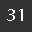
<style>
.page{position:relative;width:32px;height:32px;background:#333333}
.page>*{position:absolute;margin:0}
.t1{font:17.8px "MyriadPro-Regular";color:#ffffff;scale:1.12 1}
</style>
<div class="page">
<p class="t1" style="left:7px;top:9px;width:16px;height:12px">31</p>
</div>
